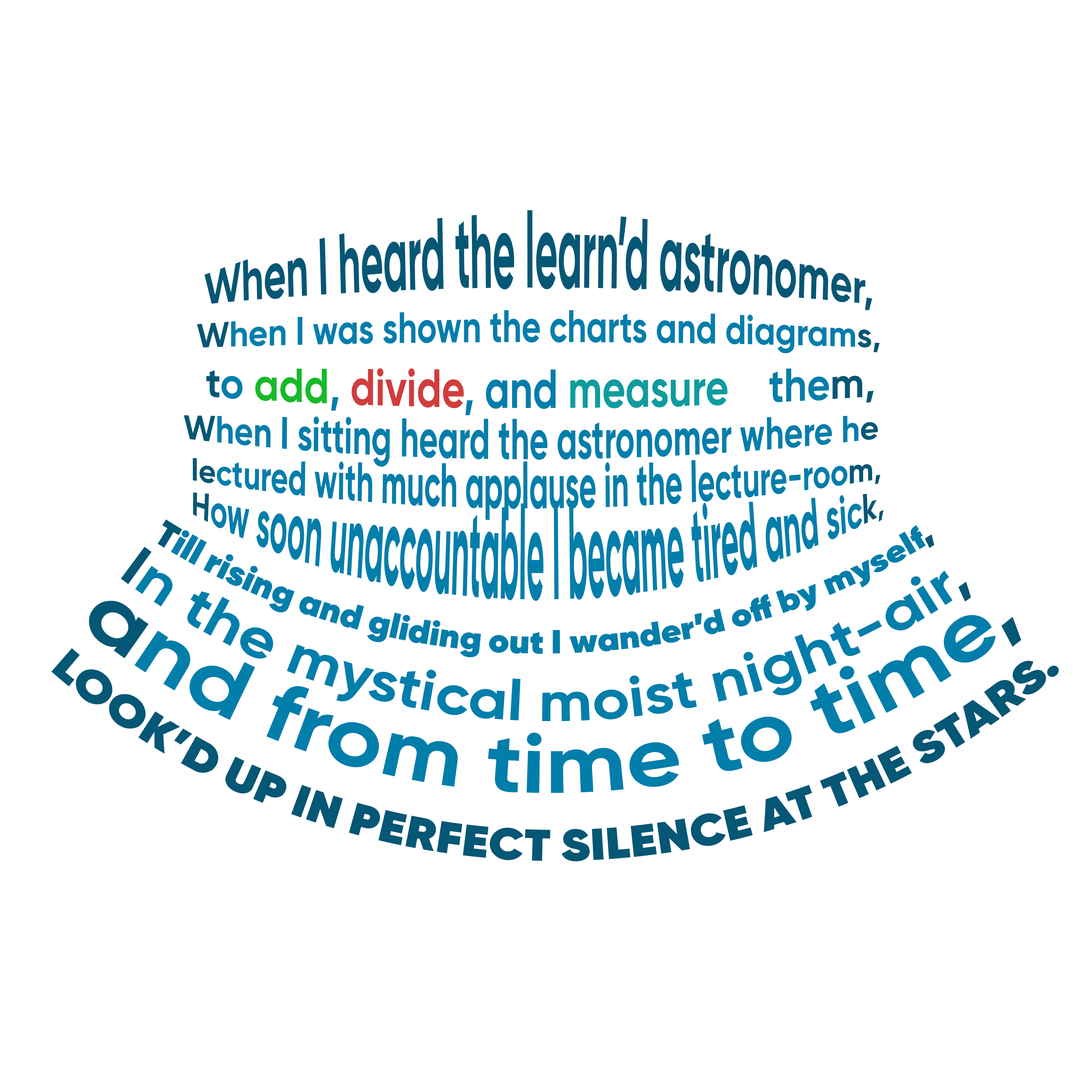
<style>
.page{position:relative;width:1092px;height:1092px;background:#ffffff}
.page>*{position:absolute;margin:0}
.t1{font:41.8px "Gilroy-Bold";color:#045775;scale:0.93 1}
.t2{font:33.4px "Gilroy-Bold";color:#027eab}
.t3{font:33.4px "Gilroy-Bold";color:#045775}
.t4{font:40.1px "Gilroy-Bold";color:#045775}
.t5{font:40.1px "Gilroy-Bold";color:#027eab}
.t6{font:40.1px "Gilroy-Bold";color:#16ba29}
.t7{font:40.1px "Gilroy-Bold";color:#d03d3d}
.t8{font:40.1px "Gilroy-Bold";color:#0e9c9e}
.t9{font:32.7px "Gilroy-Bold";color:#027eab}
.t10{font:32.7px "Gilroy-Bold";color:#045775}
.t11{font:30.1px "Gilroy-Bold";color:#027eab}
.t12{font:30.1px "Gilroy-Bold";color:#045775}
.t13{font:33.4px "Gilroy-Heavy";color:#027eab}
.t14{font:33.4px "Gilroy-Heavy";color:#045775}
.t15{font:56.8px "Gilroy-Bold";color:#027eab}
.t16{font:56.8px "Gilroy-Bold";color:#045775}
.t17{font:83.5px "Gilroy-Bold";color:#027eab}
.t18{font:83.5px "Gilroy-Bold";color:#045775}
.t19{font:44.4px "Gilroy-Heavy";color:#045775;text-transform:uppercase}
</style>
<div class="page">
<p class="t1" style="left:204px;top:210px;width:668px;height:100px">When I heard the learn’d astronomer,</p>
<p class="t2" style="left:197px;top:310px;width:683px;height:105px"><span class="t3">W</span>hen I was shown the charts and diagram<span class="t3">s,<br> </span><span class="t4">t</span><span class="t5">o </span><span class="t6">add</span><span class="t5">, </span><span class="t7">divide</span><span class="t5">, and </span><span class="t8">measure   </span><span class="t5"> the</span><span class="t4">m,</span></p>
<p class="t9" style="left:184px;top:415px;width:694px;height:52px"><span class="t10">W</span>hen I sitting heard the astronomer where h<span class="t10">e</span></p>
<p class="t11" style="left:193px;top:458px;width:688px;height:63px"><span class="t12">le</span>ctured with much applause in the lecture-roo<span class="t12">m,</span></p>
<p class="t11" style="left:193px;top:492px;width:691px;height:109px"><span class="t12">H</span>ow soon unaccountable I became tired and sic<span class="t12">k,</span></p>
<p class="t13" style="left:158px;top:519px;width:776px;height:138px"><span class="t14">T</span>ill rising and gliding out I wander’d off by myself<span class="t14">,</span></p>
<p class="t15" style="left:121px;top:547px;width:850px;height:174px"><span class="t16">I</span>n the mystical moist night-air<span class="t16">,</span></p>
<p class="t17" style="left:89px;top:601px;width:932px;height:192px"><span class="t18">a</span>nd from time to time<span class="t18">,</span></p>
<p class="t19" style="left:51px;top:648px;width:1008px;height:214px">Look’d up in perfect silence at the stars.</p>
</div>
